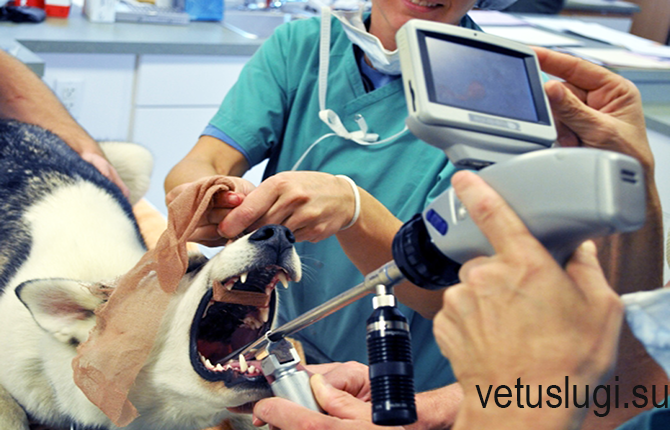
<style>
.page{position:relative;width:670px;height:430px}
.page>*{position:absolute;margin:0}
.t1{font:45px "ArialNarrow";letter-spacing:0.002em;color:#121314}
</style>
<div class="page">
<p class="t1" style="left:475px;top:376px;width:193px;height:41px">vetuslugi.su</p>
</div>
